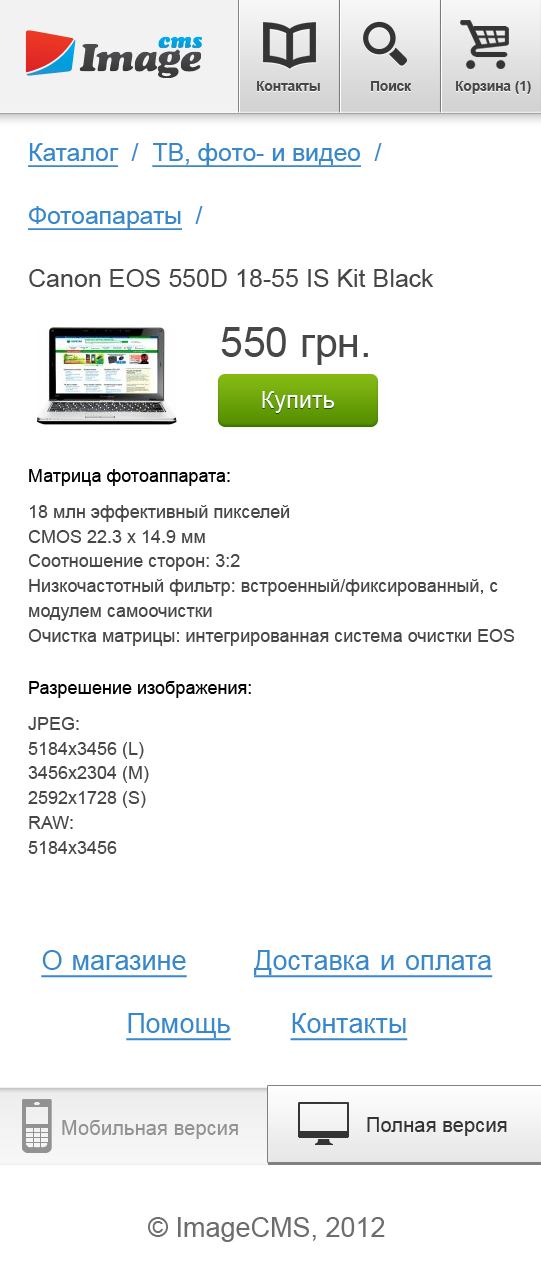
<style>
.page{position:relative;width:541px;height:1280px;background:#ffffff}
.page>*{position:absolute;margin:0}
.t1{font:13.6px "Arial-BoldMT";color:#474749}
.t2{font:25px/63px "ArialMT";color:#474749}
.t3{font:24.8px/63px "ArialMT";color:#3a88cc;text-decoration:underline}
.t4{font:24.8px/63px "ArialMT";color:#3a88cc}
.t5{font:40.9px "ArialMT";color:#474749}
.t6{font:27.3px "ArialMT";color:#3a88cc}
.t7{font:23px "ArialMT";letter-spacing:0.01em;color:#ffffff}
.t8{font:18px/24.8px "ArialMT";color:#474749}
.t9{font:18px/36px "ArialMT";color:#000000}
.t10{font:18px/36px "ArialMT";color:#474749}
.t11{font:27px/63px "ArialMT";color:#3a88cc;text-decoration:underline}
.t12{font:20.3px "ArialMT";color:#929292}
.t13{font:20.3px "ArialMT";color:#343434}
.t14{font:27px "ArialMT";color:#6d6d6d}
</style>
<div class="page">
<p class="t1" style="left:257px;top:81px;width:63px;height:10px">Контакты</p>
<p class="t1" style="left:371px;top:81px;width:40px;height:10px">Поиск</p>
<p class="t1" style="left:456px;top:81px;width:75px;height:13px">Корзина (1)</p>
<p class="t2" style="left:28px;top:143px;width:406px;height:144px"><span class="t3">Каталог</span><span class="t4">  /  </span><span class="t3">ТВ, фото- и видео</span><span class="t4">  /  </span><span class="t3">Фотоапараты</span><span class="t4">  /  <br></span>Canon EOS 550D 18-55 IS Kit Black</p>
<p class="t5" style="left:221px;top:327px;width:147px;height:38px"><span class="t6"><br></span>550 грн.</p>
<p class="t7" style="left:262px;top:391px;width:73px;height:22px">Купить</p>
<p class="t8" style="left:28px;top:469px;width:487px;height:177px"><span class="t9">Матрица фотоаппарата:<br></span><span class="t10">18 млн эффективный пикселей<br></span>CMOS 22.3 х 14.9 мм<br>Соотношение сторон: 3:2<br>Низкочастотный фильтр: встроенный/фиксированный, с модулем самоочистки<br>Очистка матрицы: интегрированная система очистки EOS</p>
<p class="t8" style="left:28px;top:681px;width:223px;height:173px"><span class="t9">Разрешение изображения:</span><span class="t10"><br>JPEG: <br></span>5184x3456 (L)<br>3456x2304 (M)<br>2592x1728 (S)<br>RAW:<br>5184x3456</p>
<p class="t11" style="left:41px;top:950px;width:452px;height:91px;text-align:center">Омагазине         Доставкаиоплата           <br>Помощь        Контакты</p>
<p class="t12" style="left:62px;top:1120px;width:176px;height:19px">Мобильная версия</p>
<p class="t13" style="left:367px;top:1117px;width:140px;height:19px">Полная версия</p>
<p class="t14" style="left:148px;top:1217px;width:237px;height:25px">© ImageCMS, 2012</p>
</div>
